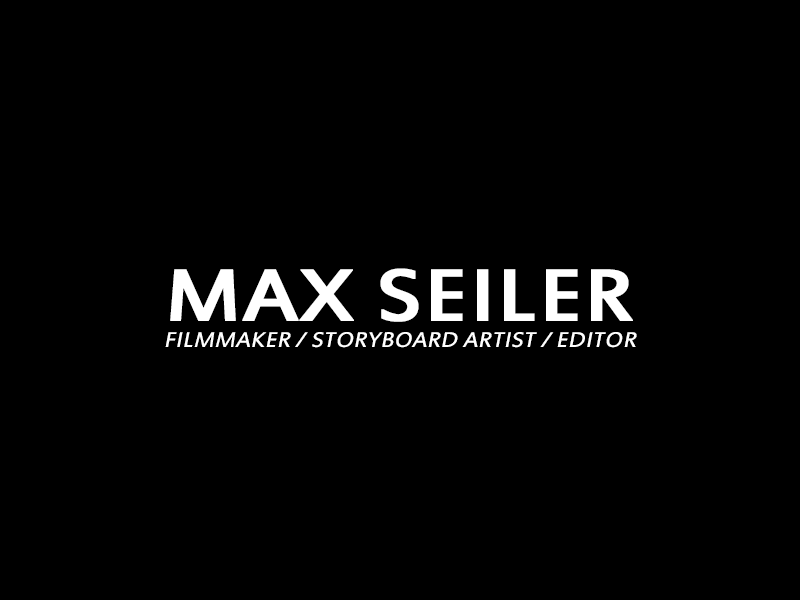
<style>
.page{position:relative;width:800px;height:600px;background:#000000}
.page>*{position:absolute;margin:0}
.t1{font:80.5px "EstrangeloEdessa";color:#ffffff;text-transform:uppercase;font-weight:bold;scale:1.14 1}
.t2{font:23.4px "EstrangeloEdessa";color:#ffffff;text-transform:uppercase;font-style:italic;scale:1.09 1}
</style>
<div class="page">
<p class="t1" style="left:170px;top:268px;width:463px;height:54px">Max Seiler</p>
<p class="t2" style="left:165px;top:332px;width:472px;height:16px">filmmaker / storyboard artist / Editor</p>
</div>
